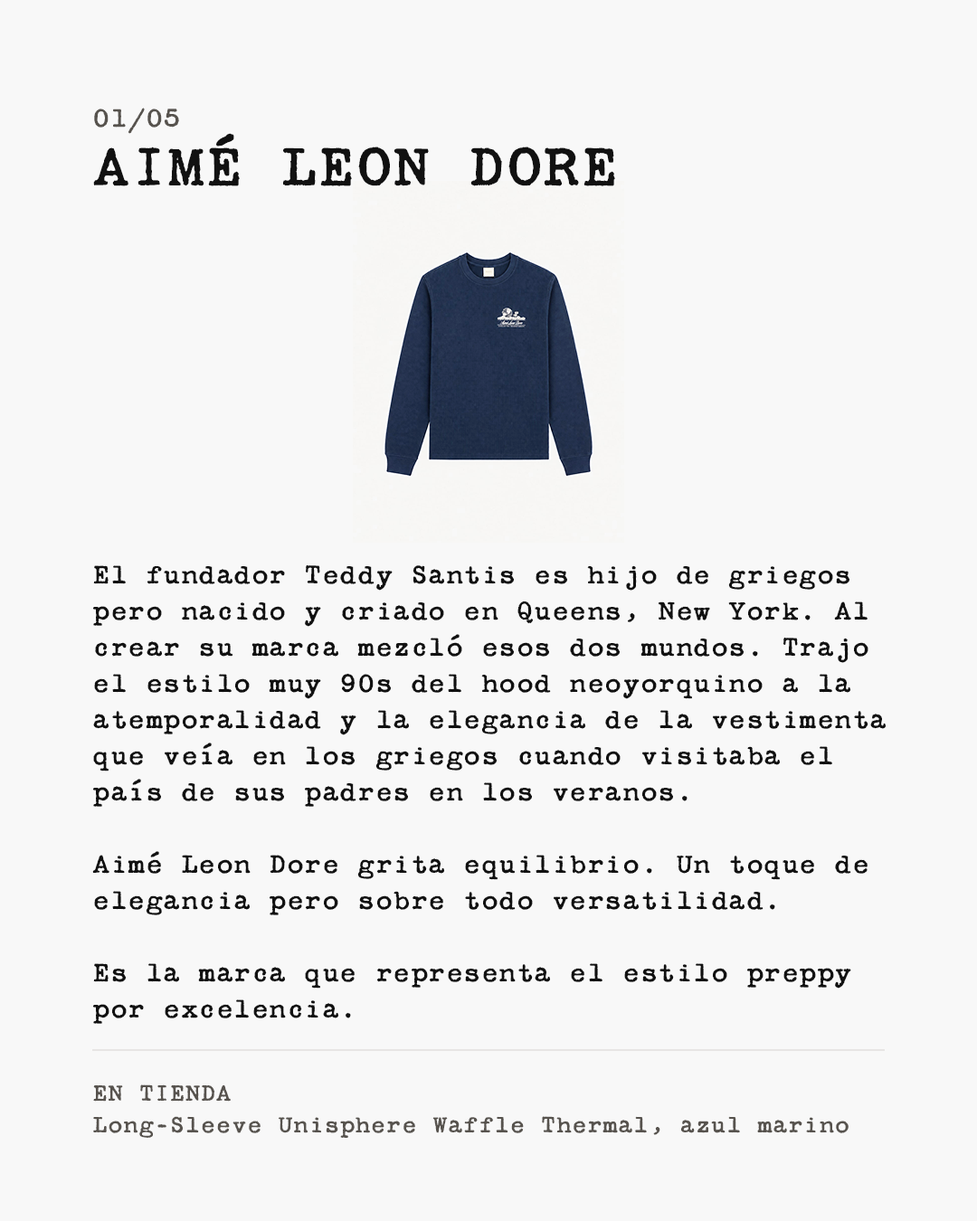
<style>
.page{position:relative;width:977px;height:1221px;background:#f8f8f8}
.page>*{position:absolute;margin:0}
.t1{font:30.1px "SecretServiceTypewriterRR-Regular";color:#57534e}
.t2{font:64.1px "SecretServiceTypewriterRR-Regular";color:#111111}
.t3{font:30.1px "SecretServiceTypewriterRR-Regular";color:#111111}
.t4{font:26.4px "SecretServiceTypewriterRR-Regular";color:#57534e}
</style>
<div class="page">
<p class="t1" style="left:94px;top:108px;width:85px;height:26px">01/05</p>
<p class="t2" style="left:93px;top:133px;width:522px;height:53px">AIMÉ LEON DORE</p>
<p class="t3" style="left:92px;top:565px;width:793px;height:459px">El fundador Teddy Santis es hijo de griegos<br>pero nacido y criado en Queens, New York. Al<br>crear su marca mezcló esos dos mundos. Trajo<br>el estilo muy 90s del hood neoyorquino a la<br>atemporalidad y la elegancia de la vestimenta<br>que veía en los griegos cuando visitaba el<br>país de sus padres en los veranos.<br><br>Aimé Leon Dore grita equilibrio. Un toque de<br>elegancia pero sobre todo versatilidad.<br><br>Es la marca que representa el estilo preppy<br>por excelencia.</p>
<p class="t4" style="left:93px;top:1084px;width:755px;height:54px">EN TIENDA<br>Long-Sleeve Unisphere Waffle Thermal, azul marino</p>
</div>
